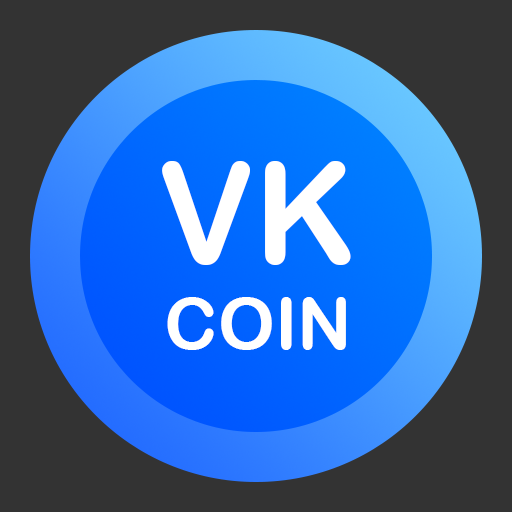
<style>
.page{position:relative;width:512px;height:512px;background:#333333}
.page>*{position:absolute;margin:0}
.t1{font:72px "ArialRoundedMTBold";color:#ffffff}
.t2{font:140px "ArialRoundedMTBold";color:#ffffff}
</style>
<div class="page">
<p class="t1" style="left:162px;top:161px;width:189px;height:189px;text-align:center"><span class="t2">VK<br></span>COIN</p>
</div>
